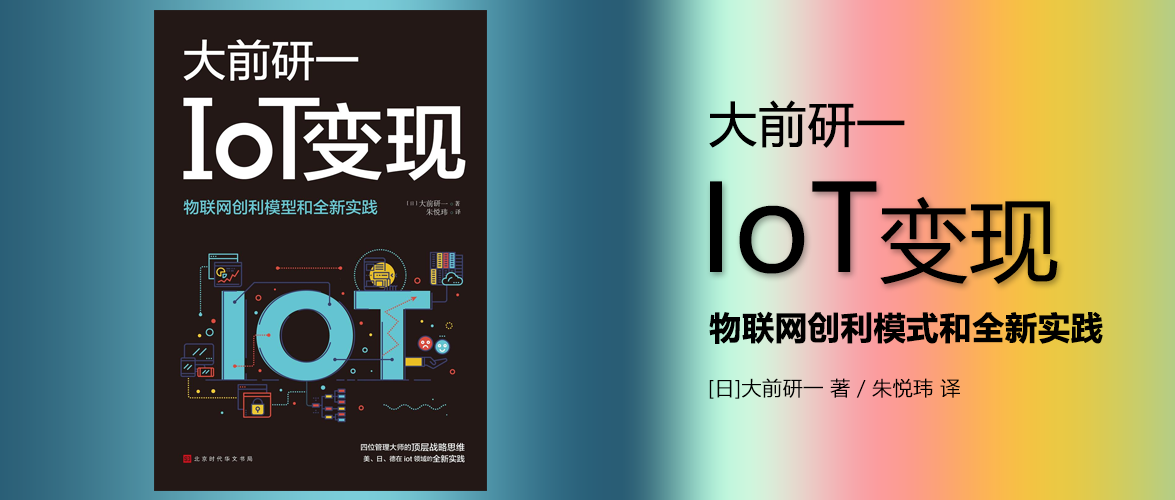
<style>
.page{position:relative;width:1175px;height:500px}
.page>*{position:absolute;margin:0}
.t1{font:48px "MicrosoftYaHei";color:#000000;font-weight:bold}
.t2{font:120px "MicrosoftYaHei";color:#000000}
.t3{font:90px "MicrosoftYaHei";color:#000000}
.t4{font:32px "MicrosoftYaHeiUI-Bold";color:#000000;font-weight:bold}
.t5{font:20px "MicrosoftYaHeiUILight";color:#000000;font-weight:bold}
</style>
<div class="page">
<p class="t1" style="left:709px;top:100px;width:196px;height:48px">大前研一</p>
<p class="t2" style="left:710px;top:181px;width:348px;height:104px">IoT<span class="t3">变现</span></p>
<p class="t4" style="left:709px;top:311px;width:394px;height:33px">物联网创利模式和全新实践</p>
<p class="t5" style="left:709px;top:378px;width:251px;height:21px">[日]大前研一 著 / 朱悦玮 译</p>
</div>
